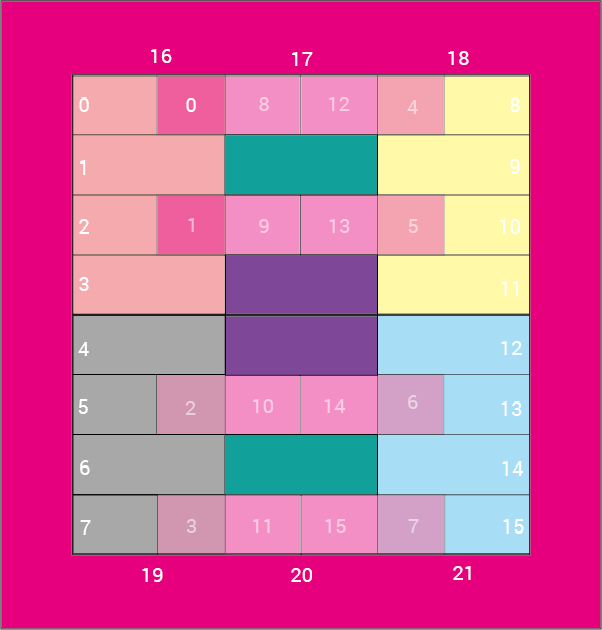
<style>
.page{position:relative;width:602px;height:630px;background:#e6007e}
.page>*{position:absolute;margin:0}
.t1{font:20px "Roboto-Regular";color:#ffffff}
.t2{font:20px "Roboto-Regular";color:#facce4}
.t3{font:20px "Roboto-Regular";color:#fad4da}
.t4{font:20px "Roboto-Regular";color:#f7bad2}
.t5{font:20px "Roboto-Regular";color:#e9cfda}
.t6{font:20px "Roboto-Regular";color:#ead3e4}
</style>
<div class="page">
<p class="t1" style="left:151px;top:49px;width:21px;height:14px">16</p>
<p class="t1" style="left:292px;top:52px;width:21px;height:14px">17</p>
<p class="t1" style="left:448px;top:51px;width:21px;height:14px">18</p>
<p class="t1" style="left:186px;top:98px;width:10px;height:14px">0</p>
<p class="t2" style="left:259px;top:97px;width:10px;height:14px">8</p>
<p class="t2" style="left:329px;top:97px;width:21px;height:14px">12</p>
<p class="t3" style="left:407px;top:100px;width:11px;height:14px">4</p>
<p class="t4" style="left:188px;top:218px;width:6px;height:14px">1</p>
<p class="t2" style="left:259px;top:219px;width:10px;height:14px">9</p>
<p class="t2" style="left:329px;top:219px;width:21px;height:14px">13</p>
<p class="t3" style="left:408px;top:219px;width:10px;height:14px">5</p>
<p class="t5" style="left:185px;top:401px;width:11px;height:14px">2</p>
<p class="t2" style="left:253px;top:399px;width:20px;height:14px">10</p>
<p class="t2" style="left:324px;top:399px;width:22px;height:14px">14</p>
<p class="t6" style="left:408px;top:395px;width:10px;height:14px">6</p>
<p class="t5" style="left:186px;top:519px;width:10px;height:14px">3</p>
<p class="t2" style="left:253px;top:519px;width:17px;height:14px">11</p>
<p class="t2" style="left:325px;top:519px;width:21px;height:14px">15</p>
<p class="t6" style="left:408px;top:519px;width:11px;height:14px">7</p>
<p class="t1" style="left:142px;top:568px;width:21px;height:14px">19</p>
<p class="t1" style="left:291px;top:568px;width:21px;height:14px">20</p>
<p class="t1" style="left:453px;top:566px;width:18px;height:14px">21</p>
</div>
